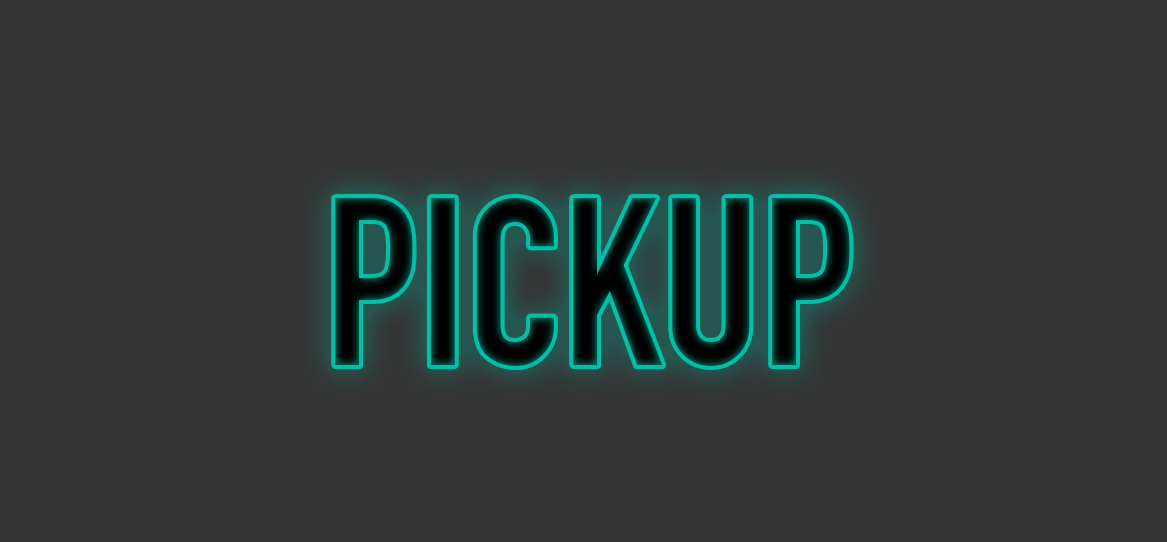
<style>
.page{position:relative;width:1167px;height:542px;background:#333333}
.page>*{position:absolute;margin:0}
.t1{font:233.7px "DINEngschrift";text-transform:uppercase}
</style>
<div class="page">
<p class="t1" style="left:335px;top:198px;width:515px;height:168px">pickup</p>
</div>
